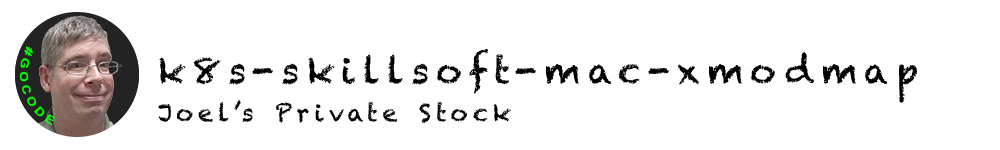
<style>
.page{position:relative;width:1000px;height:150px;background:#ffffff}
.page>*{position:absolute;margin:0}
.t1{font:11.2px "Arial-BoldMT";letter-spacing:0.2em;color:#00ff00}
.t2{font:36px "Chalkduster";letter-spacing:0.2em;color:#000000}
.t3{font:24px "Chalkduster";letter-spacing:0.2em;color:#000000}
</style>
<div class="page">
<p class="t1" style="left:19px;top:46px;width:37px;height:80px;rotate:72deg">#GOCODE</p>
<p class="t2" style="left:159px;top:48px;width:758px;height:55px">k8s-skillsoft-mac-xmodmap</p>
<p class="t3" style="left:158px;top:100px;width:353px;height:23px">Joel’s Private Stock</p>
</div>
